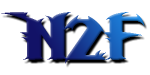
<style>
.page{position:relative;width:150px;height:75px;background:#ffffff}
.page>*{position:absolute;margin:0}
.t1{font:60px "UnrealTournament"}
</style>
<div class="page">
<p class="t1" style="left:1px;top:12px;width:144px;height:52px">N2F</p>
</div>
